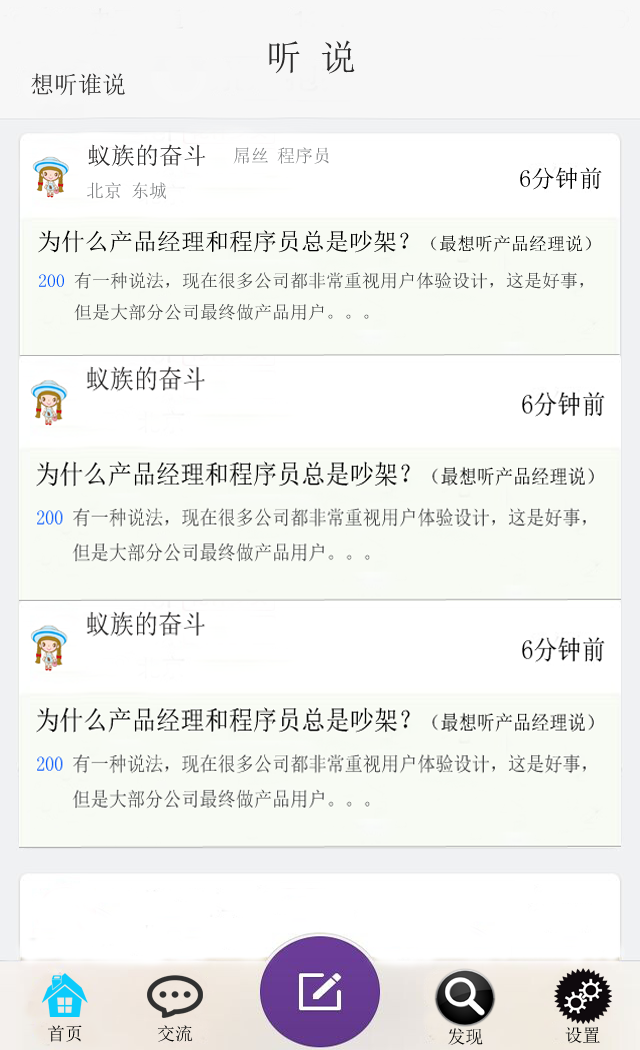
<style>
.page{position:relative;width:640px;height:1050px;background:#ffffff}
.page>*{position:absolute;margin:0}
.t1{font:24px "SimSun";color:#2b2a2a}
.t2{font:18px "SimSun";color:#7d7f81}
.t3{font:24px "SimSun";color:#000000}
.t4{font:18px "SimSun";color:#000000}
.t5{font:18px "SimSun";color:#0053fd}
.t6{font:18px "SimSun";color:#414243}
.t7{font:18px "SimSun";color:#050505}
</style>
<div class="page">
<p class="t1" style="left:31px;top:73px;width:94px;height:23px">想听谁说</p>
<p class="t1" style="left:88px;top:144px;width:118px;height:23px">蚁族的奋斗</p>
<p class="t2" style="left:233px;top:147px;width:35px;height:17px">屌丝</p>
<p class="t2" style="left:277px;top:147px;width:52px;height:17px">程序员</p>
<p class="t3" style="left:520px;top:167px;width:82px;height:23px">6分钟前</p>
<p class="t2" style="left:87px;top:182px;width:79px;height:17px">北京 东城</p>
<p class="t3" style="left:38px;top:230px;width:553px;height:23px">为什么产品经理和程序员总是吵架？<span class="t4">（最想听产品经理说）</span></p>
<p class="t5" style="left:39px;top:274px;width:25px;height:13px">200</p>
<p class="t6" style="left:74px;top:272px;width:509px;height:49px">有一种说法，现在很多公司都非常重视用户体验设计，这是好事，<br>但是大部分公司最终做产品用户。。。</p>
<p class="t4" style="left:48px;top:1025px;width:34px;height:17px">首页</p>
<p class="t7" style="left:158px;top:1025px;width:35px;height:17px">交流</p>
<p class="t7" style="left:448px;top:1028px;width:35px;height:17px">发现</p>
<p class="t7" style="left:565px;top:1027px;width:35px;height:17px">设置</p>
</div>
